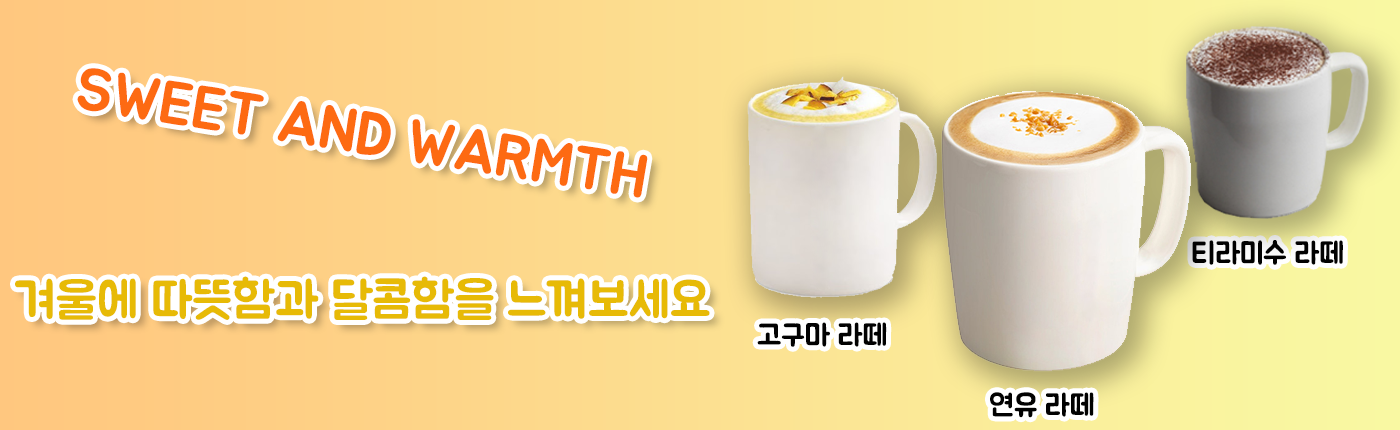
<style>
.page{position:relative;width:1400px;height:430px}
.page>*{position:absolute;margin:0}
.t1{font:60px "BMJUA";color:#fd6a12}
.t2{font:30px "BMJUA";color:#010101}
.t3{font:50px "BMJUA";color:#e7ba06}
</style>
<div class="page">
<p class="t1" style="left:77px;top:68px;width:571px;height:130px;rotate:9deg">SWEET AND WARMTH</p>
<p class="t2" style="left:1192px;top:240px;width:151px;height:25px">티라미수 라떼</p>
<p class="t3" style="left:15px;top:276px;width:695px;height:44px">겨울에 따뜻함과 달콤함을 느껴보세요</p>
<p class="t2" style="left:757px;top:322px;width:130px;height:25px">고구마 라떼</p>
<p class="t2" style="left:990px;top:392px;width:104px;height:26px">연유 라떼</p>
</div>
